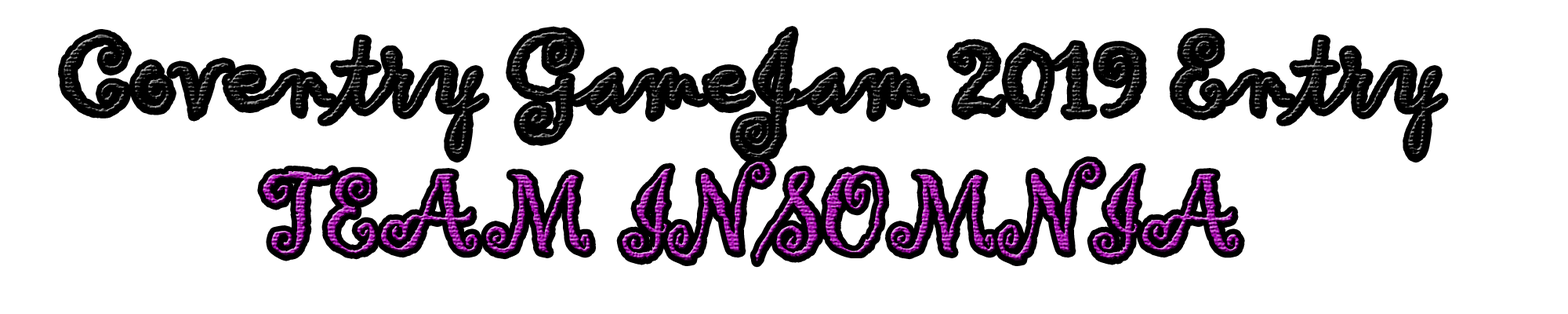
<style>
.page{position:relative;width:1568px;height:314px;background:#ffffff}
.page>*{position:absolute;margin:0}
.t1{font:116.2px "Gigi-Regular"}
</style>
<div class="page">
<p class="t1" style="left:64px;top:31px;width:1379px;height:231px;text-align:center">Coventry GameJam 2019 Entry<br>TEAM INSOMNIA</p>
</div>
